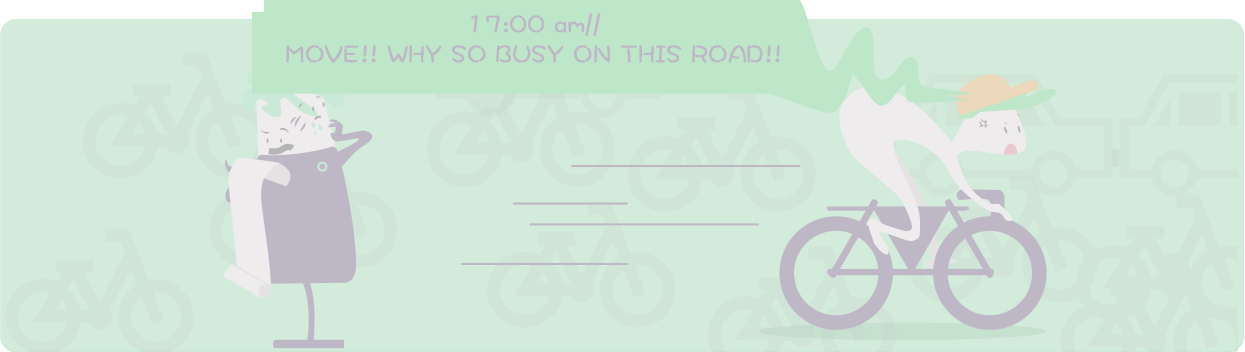
<style>
.page{position:relative;width:1245px;height:352px;background:#d3ebda}
.page>*{position:absolute;margin:0}
.t1{font:25px "DFWaWaSC-W5";color:#beb8c6;font-weight:bold}
</style>
<div class="page">
<p class="t1" style="left:286px;top:13px;width:494px;height:50px;text-align:center">17:00 am//<br>MOVE!! WHY SO BUSY ON THIS ROAD!!</p>
</div>
